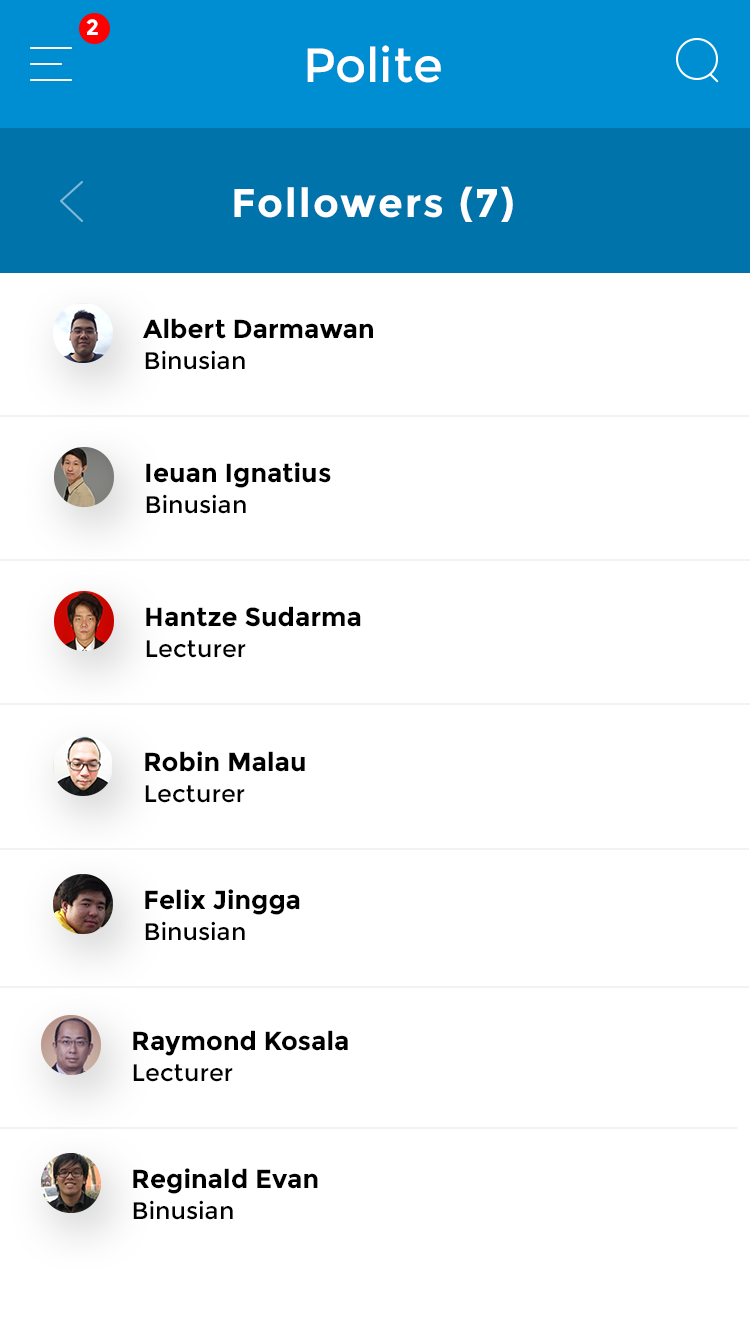
<style>
.page{position:relative;width:750px;height:1334px;background:#ffffff}
.page>*{position:absolute;margin:0}
.t1{font:22px "Montserrat-Bold";letter-spacing:0.05em;color:#ffffff}
.t2{font:48px "Montserrat-Regular";color:#ffffff}
.t3{font:40px "Montserrat-Bold";letter-spacing:0.05em;color:#ffffff}
.t4{font:26px "Montserrat-Bold";color:#000000}
.t5{font:12px "Montserrat-Regular";color:#000000}
</style>
<div class="page">
<p class="t1" style="left:86px;top:19px;width:12px;height:16px">2</p>
<p class="t2" style="left:307px;top:45px;width:134px;height:38px">Polite</p>
<p class="t3" style="left:234px;top:186px;width:279px;height:36px">Followers (7)</p>
<p class="t4" style="left:142px;top:318px;width:231px;height:21px">Albert Darmawan</p>
<p class="t5" style="left:145px;top:350px;width:100px;height:20px">Binusian</p>
<p class="t4" style="left:146px;top:462px;width:185px;height:26px">Ieuan Ignatius</p>
<p class="t5" style="left:146px;top:494px;width:100px;height:20px">Binusian</p>
<p class="t4" style="left:146px;top:606px;width:215px;height:21px">Hantze Sudarma</p>
<p class="t5" style="left:146px;top:640px;width:100px;height:18px">Lecturer</p>
<p class="t4" style="left:145px;top:751px;width:160px;height:21px">Robin Malau</p>
<p class="t5" style="left:145px;top:785px;width:100px;height:18px">Lecturer</p>
<p class="t4" style="left:145px;top:889px;width:155px;height:26px">Felix Jingga</p>
<p class="t5" style="left:145px;top:921px;width:100px;height:20px">Binusian</p>
<p class="t4" style="left:133px;top:1030px;width:215px;height:26px">Raymond Kosala</p>
<p class="t5" style="left:133px;top:1064px;width:100px;height:18px">Lecturer</p>
<p class="t4" style="left:133px;top:1168px;width:185px;height:26px">Reginald Evan</p>
<p class="t5" style="left:133px;top:1200px;width:100px;height:20px">Binusian</p>
</div>
